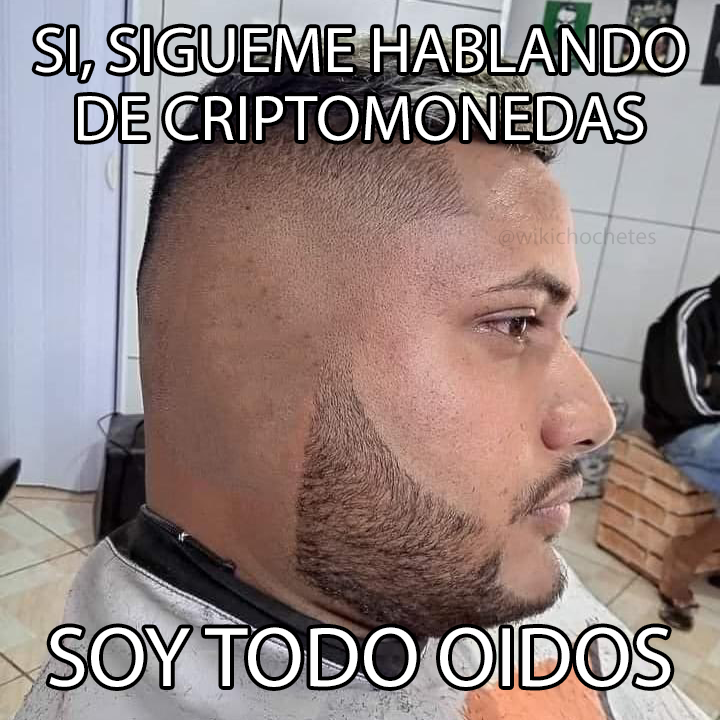
<style>
.page{position:relative;width:720px;height:720px}
.page>*{position:absolute;margin:0}
.t1{font:65px "MyriadPro-Regular";color:#ffffff}
.t2{font:23.7px "MyriadPro-Regular"}
.t3{font:85.2px "MyriadPro-Regular";color:#ffffff}
</style>
<div class="page">
<p class="t1" style="left:35px;top:27px;width:651px;height:114px;text-align:center">SI, SIGUEME HABLANDO<br>DE CRIPTOMONEDAS</p>
<p class="t2" style="left:498px;top:227px;width:158px;height:20px">@wikichochetes</p>
<p class="t3" style="left:49px;top:627px;width:622px;height:60px">SOY TODO OIDOS</p>
</div>
